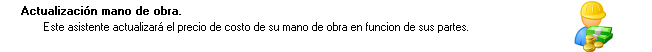
<style>
.page{position:relative;width:652px;height:52px;background:#ffffff}
.page>*{position:absolute;margin:0}
.t1{font:11.4px "MS Sans Serif";color:#000000;font-weight:bold}
.t2{font:11.4px "MS Sans Serif";color:#000000}
</style>
<div class="page">
<p class="t1" style="left:21px;top:6px;width:160px;height:9px">Actualización mano de obra.</p>
<p class="t2" style="left:44px;top:22px;width:424px;height:11px">Este asistente actualizará el precio de costo de su mano de obra en funcion de sus partes.</p>
</div>
